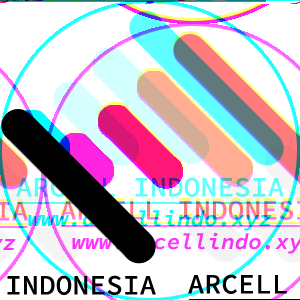
<style>
.page{position:relative;width:300px;height:300px;background:#ffffff}
.page>*{position:absolute;margin:0}
.t1{font:28px "SourceCodePro-Medium"}
.t2{font:22px "SourceCodePro-SemiboldIt";scale:1.03 1}
</style>
<div class="page">
<p class="t1" style="left:16px;top:176px;width:268px;height:20px">ARCELL INDONESIA</p>
<p class="t2" style="left:28px;top:208px;width:244px;height:22px">www.arcellindo.xyz</p>
</div>
